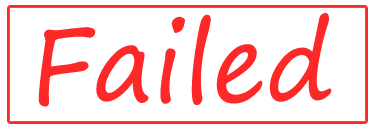
<style>
.page{position:relative;width:374px;height:128px;background:#ffffff}
.page>*{position:absolute;margin:0}
.t1{font:103.9px "SegoePrint";color:#fd2828}
</style>
<div class="page">
<p class="t1" style="left:38px;top:13px;width:294px;height:94px">Failed</p>
</div>
